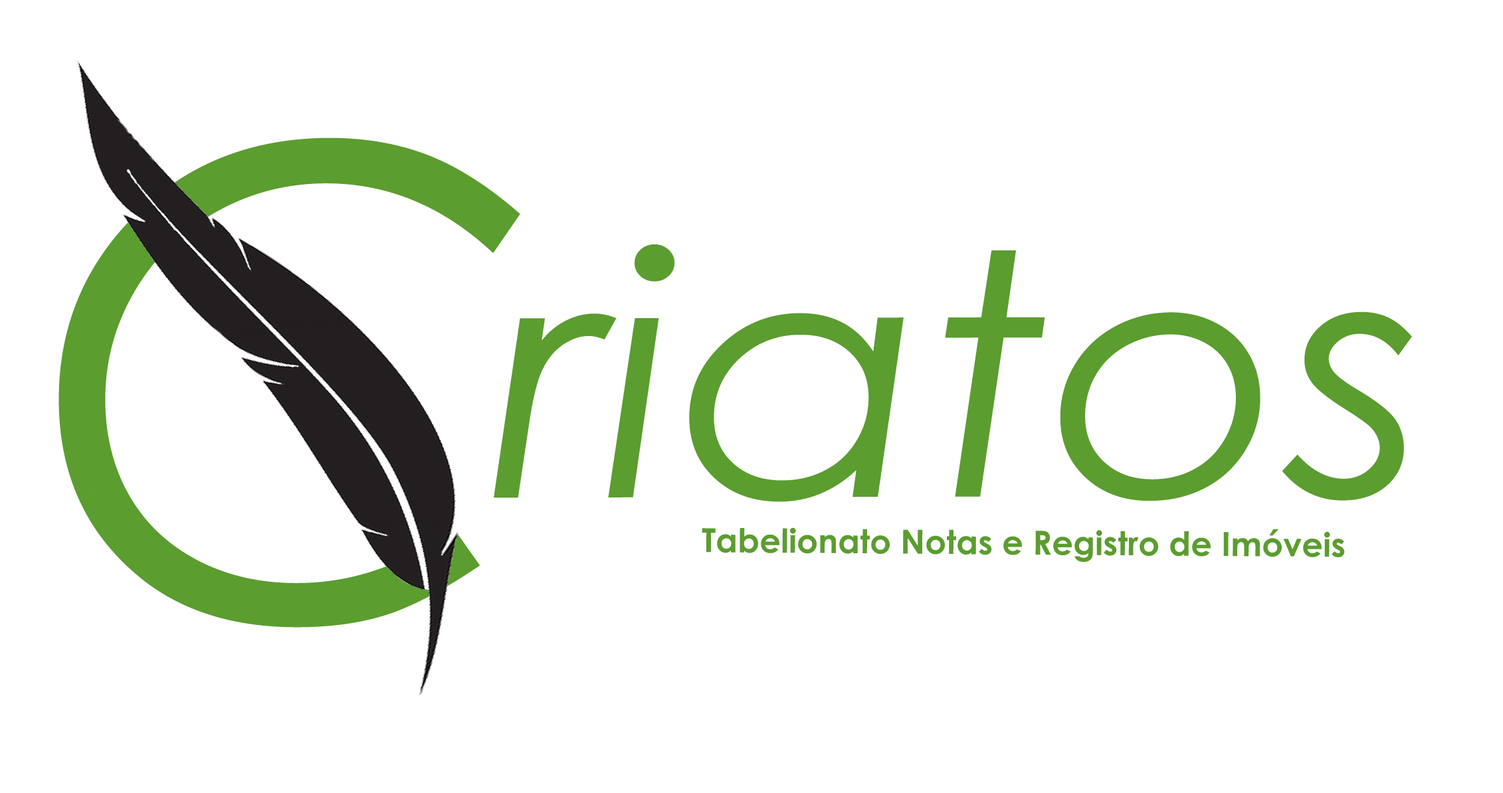
<style>
.page{position:relative;width:1503px;height:793px;background:#ffffff}
.page>*{position:absolute;margin:0}
.t1{font:337.2px "CenturyGothic-Italic";color:#5b9d2f;scale:1.08 1}
.t2{font:33.2px "CenturyGothic-Bold";color:#5b9d2f}
</style>
<div class="page">
<p class="t1" style="left:494px;top:245px;width:918px;height:257px">riatos</p>
<p class="t2" style="left:702px;top:528px;width:643px;height:34px">Tabelionato Notas e Registro de Imóveis</p>
</div>
